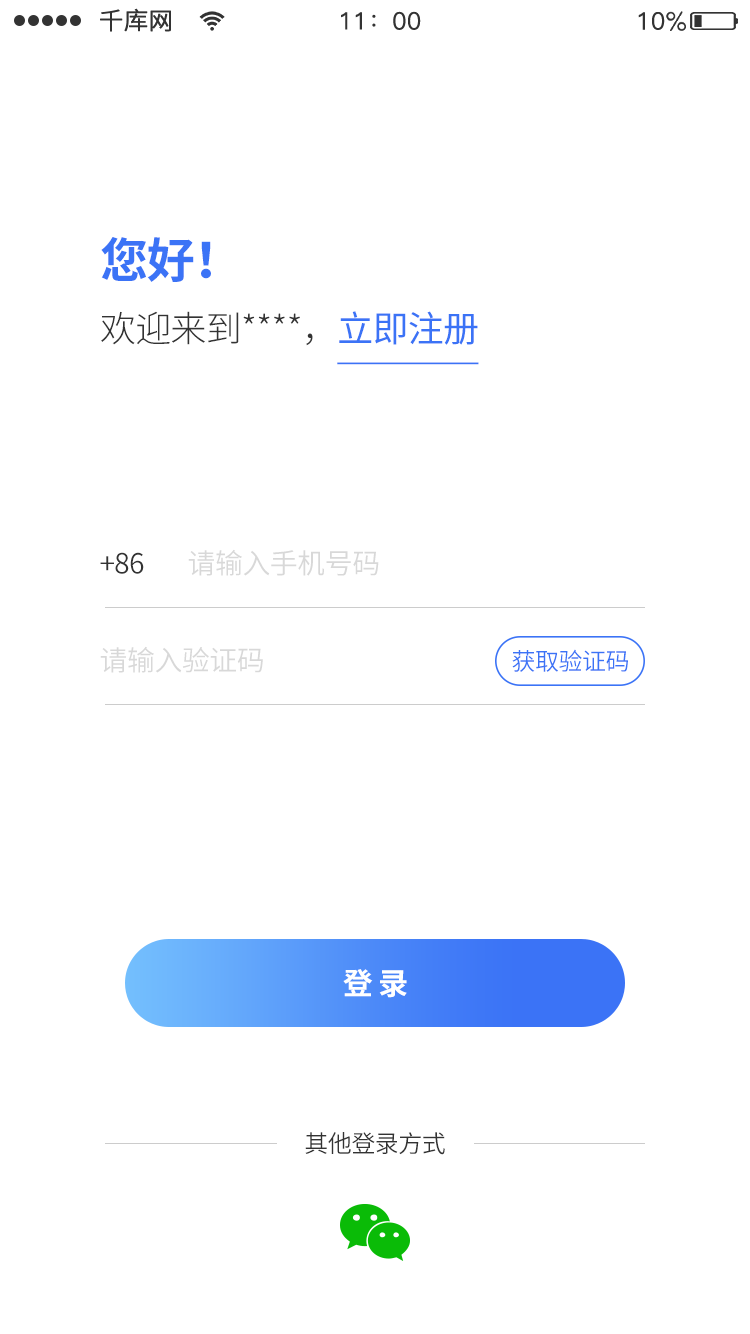
<style>
.page{position:relative;width:750px;height:1334px;background:#ffffff}
.page>*{position:absolute;margin:0}
.t1{font:48px "SourceHanSansCN-Bold";letter-spacing:-0.02em;color:#3b73f6}
.t2{font:36px "SourceHanSansCN-Light";letter-spacing:-0.02em;color:#333333}
.t3{font:36px "SourceHanSansCN-Regular";letter-spacing:-0.02em;color:#3b73f6;text-decoration:underline}
.t4{font:28px "SourceHanSansCN-Normal";letter-spacing:-0.02em;color:#333333}
.t5{font:28px "SourceHanSansCN-Normal";letter-spacing:-0.02em;color:#d8d8d8}
.t6{font:24px "SourceHanSansCN-Normal";letter-spacing:-0.02em;color:#3b73f6}
.t7{font:30px "SourceHanSansCN-Bold";letter-spacing:-0.02em;color:#ffffff}
.t8{font:24px "SourceHanSansCN-Normal";letter-spacing:-0.02em;color:#333333}
</style>
<div class="page">
<p class="t1" style="left:101px;top:237px;width:110px;height:45px">您好！</p>
<p class="t2" style="left:101px;top:311px;width:378px;height:54px">欢迎来到****，<span class="t3">立即注册</span></p>
<p class="t4" style="left:100px;top:552px;width:44px;height:22px">+86</p>
<p class="t5" style="left:188px;top:549px;width:191px;height:27px">请输入手机号码</p>
<p class="t5" style="left:100px;top:646px;width:163px;height:27px">请输入验证码</p>
<p class="t6" style="left:512px;top:649px;width:116px;height:23px">获取验证码</p>
<p class="t7" style="left:343px;top:969px;width:64px;height:29px">登 录</p>
<p class="t8" style="left:305px;top:1132px;width:140px;height:23px">其他登录方式</p>
</div>
